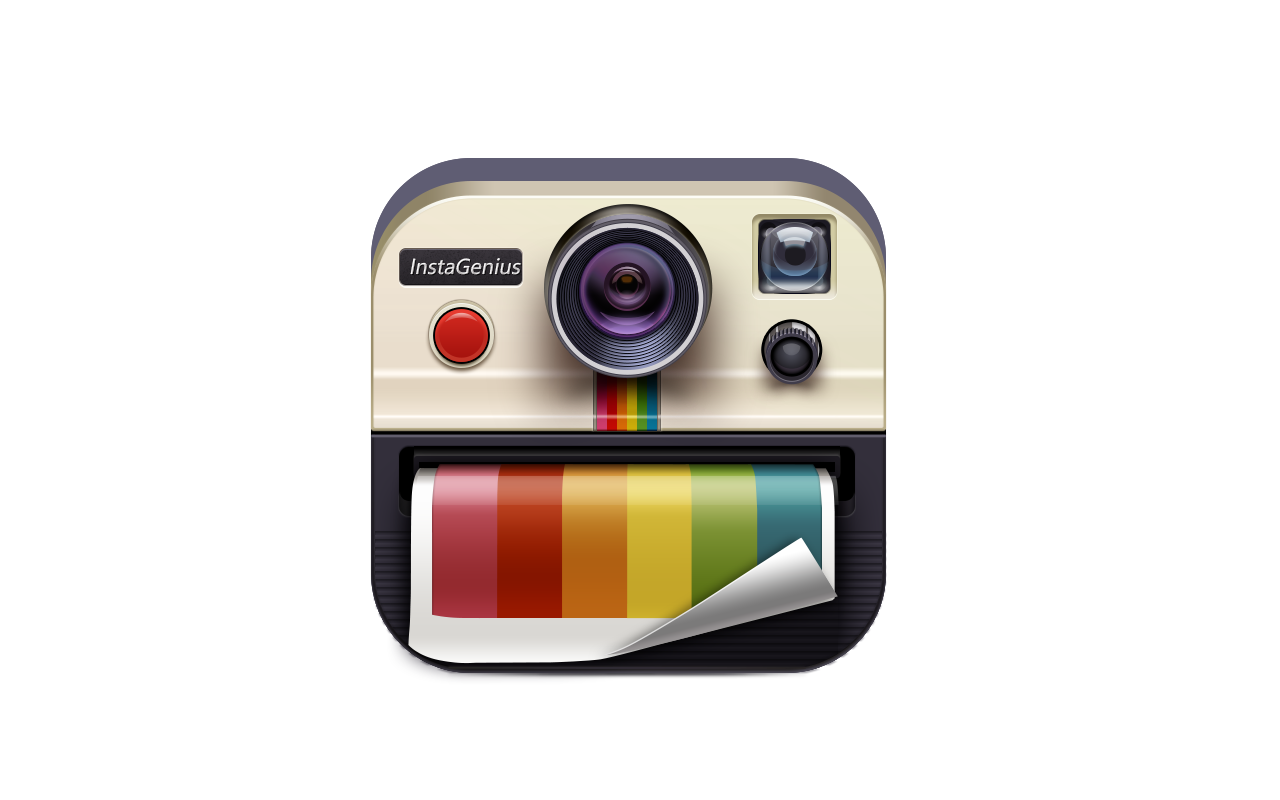
<style>
.page{position:relative;width:1280px;height:800px;background:#ffffff}
.page>*{position:absolute;margin:0}
.t1{font:20px "MicrosoftYaHei";font-style:italic}
</style>
<div class="page">
<p class="t1" style="left:410px;top:258px;width:111px;height:17px">InstaGenius</p>
</div>
